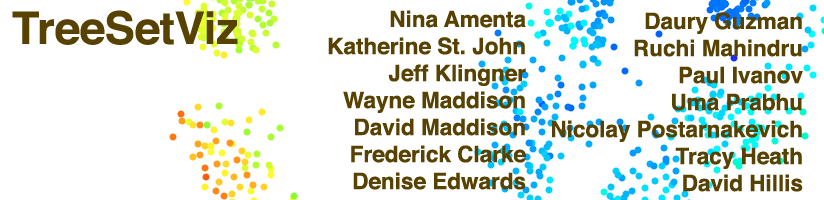
<style>
.page{position:relative;width:824px;height:200px;background:#ffffff}
.page>*{position:absolute;margin:0}
.t1{font:45px "Helvetica-Bold";color:#574201}
.t2{font:22.5px "Helvetica-Bold";color:#574201}
</style>
<div class="page">
<p class="t1" style="left:12px;top:10px;width:226px;height:35px">TreeSetViz</p>
<p class="t2" style="left:328px;top:10px;width:198px;height:180px;text-align:right">Nina Amenta<br>Katherine St. John<br>Jeff Klingner<br>Wayne Maddison<br>David Maddison<br>Frederick Clarke<br>Denise Edwards</p>
</div>
